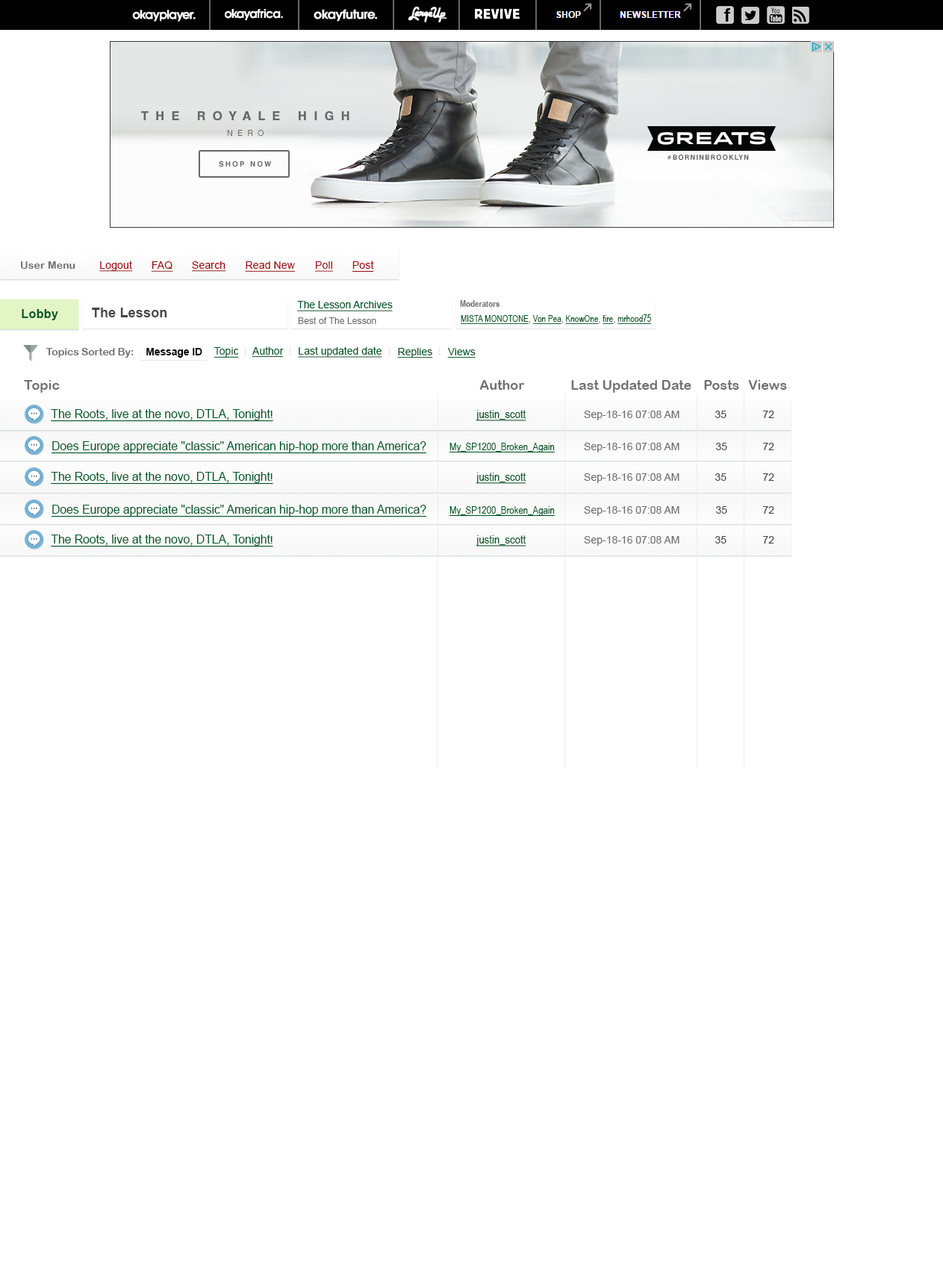
<style>
.page{position:relative;width:943px;height:1264px;background:#ffffff}
.page>*{position:absolute;margin:0}
.t1{font:10.5px "ArialRoundedMTBold";letter-spacing:0.01em;color:#707070}
.t2{font:10.5px "ArialMT";letter-spacing:0.01em;color:#9e0b0f;text-decoration:underline}
.t3{font:10.5px "ArialMT";letter-spacing:-0.01em;color:#005826;text-decoration:underline}
.t4{font:9px "ArialNarrow-Bold";color:#707070}
.t5{font:11.9px "Arial-BoldMT";letter-spacing:0.025em;color:#005826}
.t6{font:13.4px "Arial-BoldMT";letter-spacing:0.01em;color:#464646}
.t7{font:9px "ArialMT";letter-spacing:0.01em;color:#707070}
.t8{font:9px "ArialNarrow";letter-spacing:0.01em;color:#005826;text-decoration:underline}
.t9{font:9px "ArialNarrow";letter-spacing:0.01em;color:#005826}
.t10{font:10.5px "ArialRoundedMTBold";letter-spacing:-0.01em;color:#707070}
.t11{font:10.5px "Arial-BoldMT";letter-spacing:-0.01em;color:#000000}
.t12{font:10.5px "ArialMT";color:#005826;text-decoration:underline}
.t13{font:13.4px "ArialRoundedMTBold";color:#707070}
.t14{font:11.9px "ArialMT";letter-spacing:-0.01em;color:#005826;text-decoration:underline}
.t15{font:11.9px "ArialNarrow";color:#005826;text-decoration:underline}
.t16{font:10.5px "ArialMT";color:#707070}
.t17{font:10.5px "ArialMT";color:#464646}
.t18{font:10.5px "ArialNarrow";color:#005826;text-decoration:underline}
</style>
<div class="page">
<p class="t1" style="left:21px;top:261px;width:54px;height:8px">User Menu</p>
<p class="t2" style="left:99px;top:261px;width:34px;height:11px">Logout</p>
<p class="t2" style="left:151px;top:261px;width:22px;height:11px">FAQ</p>
<p class="t2" style="left:192px;top:261px;width:34px;height:11px">Search</p>
<p class="t2" style="left:245px;top:261px;width:51px;height:11px">Read New</p>
<p class="t2" style="left:315px;top:261px;width:18px;height:11px">Poll</p>
<p class="t2" style="left:352px;top:261px;width:22px;height:11px">Post</p>
<p class="t3" style="left:297px;top:301px;width:96px;height:10px">The Lesson Archives</p>
<p class="t4" style="left:460px;top:300px;width:40px;height:7px">Moderators</p>
<p class="t5" style="left:22px;top:309px;width:36px;height:11px">Lobby</p>
<p class="t6" style="left:92px;top:308px;width:75px;height:9px">The Lesson</p>
<p class="t7" style="left:298px;top:317px;width:78px;height:7px">Best of The Lesson</p>
<p class="t8" style="left:461px;top:314px;width:191px;height:10px">MISTA MONOTONE<span class="t9">, </span>Von Pea<span class="t9">, </span>KnowOne<span class="t9">, </span>fire<span class="t9">, </span>mrhood75</p>
<p class="t10" style="left:46px;top:348px;width:88px;height:10px">Topics Sorted By:</p>
<p class="t11" style="left:146px;top:348px;width:56px;height:10px">Message ID</p>
<p class="t12" style="left:214px;top:347px;width:25px;height:11px">Topic</p>
<p class="t12" style="left:252px;top:347px;width:32px;height:11px">Author</p>
<p class="t12" style="left:298px;top:347px;width:84px;height:11px">Last updated date</p>
<p class="t12" style="left:397px;top:348px;width:36px;height:10px">Replies</p>
<p class="t12" style="left:447px;top:348px;width:29px;height:10px">Views</p>
<p class="t13" style="left:24px;top:380px;width:36px;height:13px">Topic</p>
<p class="t13" style="left:479px;top:380px;width:45px;height:10px">Author</p>
<p class="t13" style="left:571px;top:380px;width:121px;height:13px">Last Updated Date</p>
<p class="t13" style="left:704px;top:380px;width:35px;height:10px">Posts</p>
<p class="t13" style="left:748px;top:380px;width:39px;height:10px">Views</p>
<p class="t14" style="left:51px;top:409px;width:222px;height:13px">The Roots, live at the novo, DTLA, Tonight<span class="t3">!</span></p>
<p class="t15" style="left:476px;top:410px;width:50px;height:11px">justin_scott</p>
<p class="t16" style="left:584px;top:411px;width:96px;height:9px">Sep-18-16 07:08 AM</p>
<p class="t17" style="left:715px;top:411px;width:12px;height:7px">35</p>
<p class="t17" style="left:763px;top:411px;width:11px;height:7px">72</p>
<p class="t14" style="left:51px;top:441px;width:375px;height:13px">Does Europe appreciate "classic" American hip-hop more than America?</p>
<p class="t18" style="left:449px;top:443px;width:106px;height:10px">My_SP1200_Broken_Again</p>
<p class="t16" style="left:584px;top:443px;width:96px;height:10px">Sep-18-16 07:08 AM</p>
<p class="t17" style="left:716px;top:443px;width:11px;height:7px">35</p>
<p class="t17" style="left:763px;top:443px;width:11px;height:7px">72</p>
<p class="t14" style="left:51px;top:472px;width:222px;height:13px">The Roots, live at the novo, DTLA, Tonight<span class="t3">!</span></p>
<p class="t15" style="left:476px;top:473px;width:50px;height:11px">justin_scott</p>
<p class="t16" style="left:584px;top:473px;width:96px;height:10px">Sep-18-16 07:08 AM</p>
<p class="t17" style="left:715px;top:473px;width:12px;height:8px">35</p>
<p class="t17" style="left:763px;top:473px;width:11px;height:8px">72</p>
<p class="t14" style="left:51px;top:505px;width:375px;height:13px">Does Europe appreciate "classic" American hip-hop more than America?</p>
<p class="t18" style="left:449px;top:506px;width:106px;height:11px">My_SP1200_Broken_Again</p>
<p class="t16" style="left:584px;top:506px;width:96px;height:10px">Sep-18-16 07:08 AM</p>
<p class="t17" style="left:716px;top:506px;width:11px;height:8px">35</p>
<p class="t17" style="left:763px;top:506px;width:11px;height:8px">72</p>
<p class="t14" style="left:51px;top:535px;width:222px;height:12px">The Roots, live at the novo, DTLA, Tonight<span class="t3">!</span></p>
<p class="t15" style="left:476px;top:535px;width:50px;height:12px">justin_scott</p>
<p class="t16" style="left:584px;top:536px;width:96px;height:10px">Sep-18-16 07:08 AM</p>
<p class="t17" style="left:715px;top:536px;width:12px;height:8px">35</p>
<p class="t17" style="left:763px;top:536px;width:11px;height:8px">72</p>
</div>
